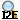
<style>
.page{position:relative;width:20px;height:20px;background:#fcfaf9}
.page>*{position:absolute;margin:0}
.t1{font:11px "BellGothicStd-Bold";letter-spacing:-0.1em;color:#000000;font-weight:bold}
</style>
<div class="page">
<p class="t1" style="left:2px;top:11px;width:16px;height:8px">I2E</p>
</div>
